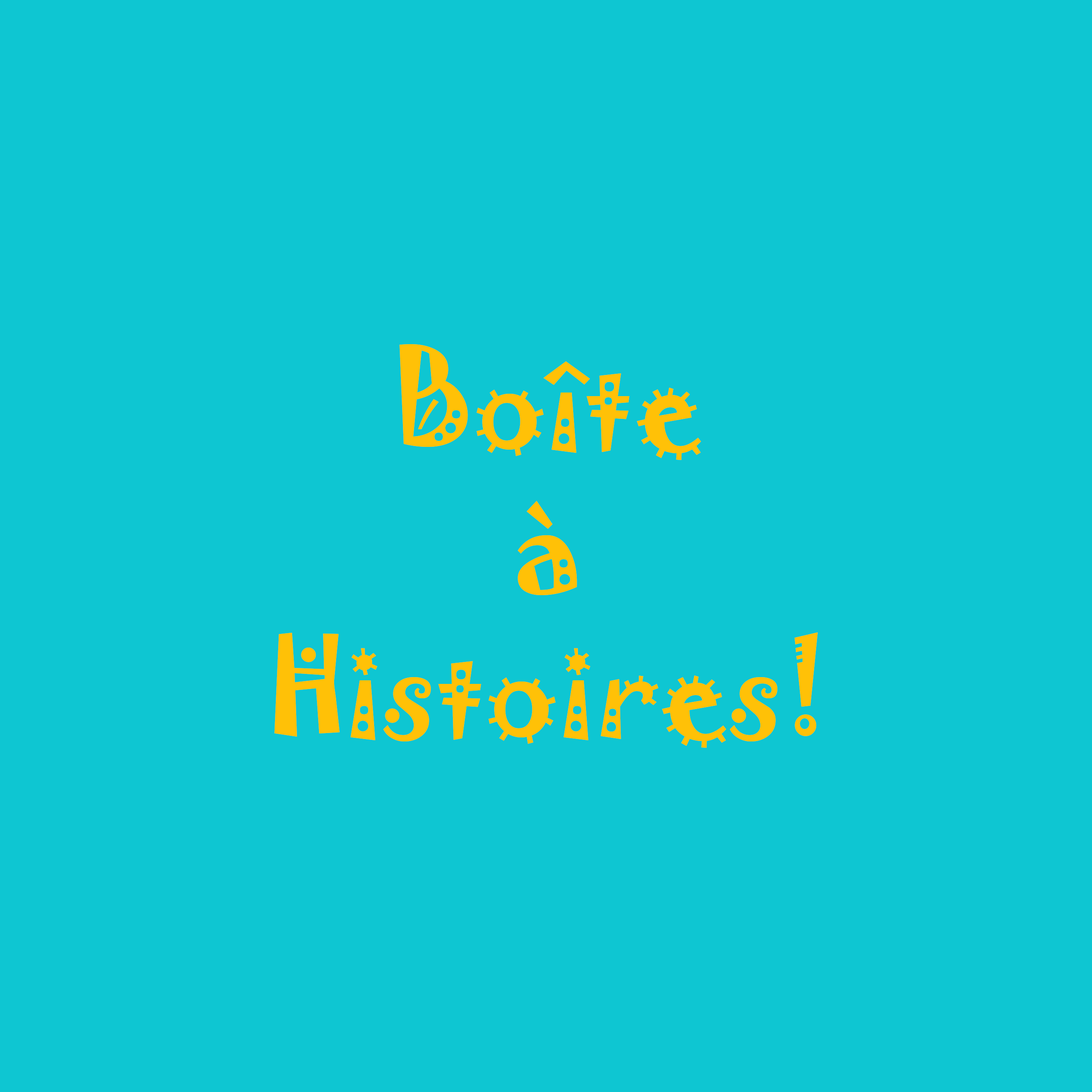
<style>
.page{position:relative;width:1092px;height:1092px;background:#0ec6d2}
.page>*{position:absolute;margin:0}
.t1{font:119.9px "Jokerman-Regular";color:#ffc107}
</style>
<div class="page">
<p class="t1" style="left:274px;top:344px;width:544px;height:404px;text-align:center">Boîte<br>à<br>Histoires!</p>
</div>
